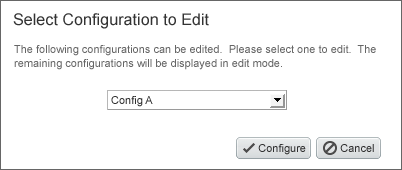
<style>
.page{position:relative;width:402px;height:170px;background:#ffffff}
.page>*{position:absolute;margin:0}
.t1{font:16px "ArialMT";letter-spacing:0.005em;color:#333333}
.t2{font:11px/20px "ArialMT";color:#666666}
.t3{font:11px/14px "ArialMT";color:#666666}
.t4{font:11px "ArialMT";color:#303030}
</style>
<div class="page">
<p class="t1" style="left:13px;top:13px;width:196px;height:16px">Select Configuration to Edit</p>
<p class="t2" style="left:14px;top:45px;width:362px;height:25px">The following configurations can be edited.  Please select one to edit.  The<br><span class="t3">remaining configurations will be displayed in edit mode.</span></p>
<p class="t4" style="left:111px;top:96px;width:42px;height:11px">Config A</p>
<p class="t4" style="left:258px;top:144px;width:48px;height:11px">Configure</p>
<p class="t4" style="left:340px;top:144px;width:34px;height:8px">Cancel</p>
</div>
